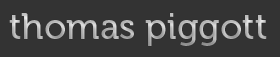
<style>
.page{position:relative;width:280px;height:57px;background:#333333}
.page>*{position:absolute;margin:0}
.t1{font:36px "Museo-500"}
</style>
<div class="page">
<p class="t1" style="left:9px;top:13px;width:258px;height:33px">thomas piggott</p>
</div>
